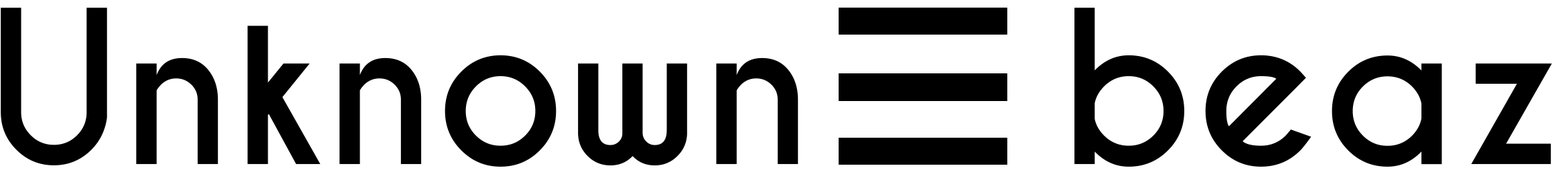
<style>
.page{position:relative;width:1568px;height:173px;background:#ffffff}
.page>*{position:absolute;margin:0}
.t1{font:199.7px "CaviarDreams-Bold";color:#000000}
</style>
<div class="page">
<p class="t1" style="left:1px;top:8px;width:798px;height:159px">Unknown</p>
<p class="t1" style="left:1074px;top:8px;width:478px;height:159px">beaz</p>
</div>
